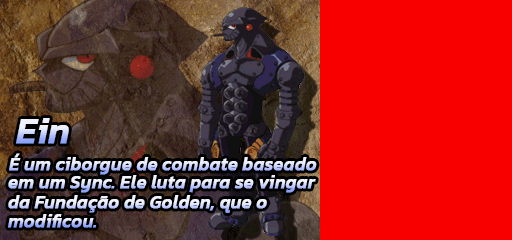
<style>
.page{position:relative;width:512px;height:240px;background:#f80000}
.page>*{position:absolute;margin:0}
.t1{font:36px "Kanit-MediumItalic";font-weight:bold}
.t2{font:18px "Kanit-MediumItalic";font-weight:bold}
</style>
<div class="page">
<p class="t1" style="left:16px;top:118px;width:53px;height:26px">Ein</p>
<p class="t2" style="left:9px;top:153px;width:308px;height:22px">É um ciborgue de combate baseado</p>
<p class="t2" style="left:8px;top:175px;width:308px;height:18px">em um Sync. Ele luta para se vingar</p>
<p class="t2" style="left:8px;top:195px;width:259px;height:18px">da Fundação de Golden, que o</p>
<p class="t2" style="left:8px;top:214px;width:88px;height:14px">modificou.</p>
</div>
